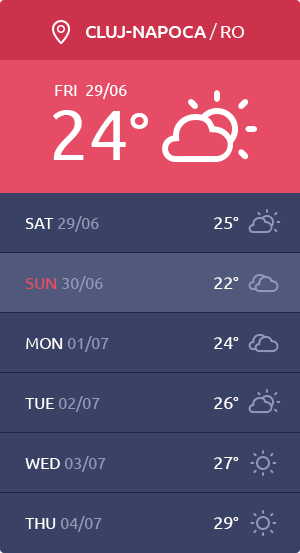
<style>
.page{position:relative;width:300px;height:553px;background:#394264}
.page>*{position:absolute;margin:0}
.t1{font:18px "Ubuntu-Medium";color:#ffffff;text-transform:uppercase}
.t2{font:18px "Ubuntu-Light";color:#ffffff;text-transform:uppercase}
.t3{font:18px "Ubuntu";color:#ffffff;text-transform:uppercase}
.t4{font:16px "Ubuntu";color:#ffffff}
.t5{font:70px "Ubuntu";color:#ffffff}
.t6{font:62.5px "Ubuntu";color:#ffffff}
.t7{font:16px/20px "Ubuntu";color:#9099b7}
.t8{font:16px/20px "Ubuntu";color:#ffffff}
.t9{font:16px/20px "Ubuntu";color:#e64c65}
.t10{font:18px/20px "Ubuntu";color:#ffffff}
.t11{font:16px "Ubuntu";color:#000000}
</style>
<div class="page">
<p class="t1" style="left:86px;top:23px;width:158px;height:17px">CLUJ-NAPOCA <span class="t2">/ </span><span class="t3">ro</span></p>
<p class="t4" style="left:55px;top:83px;width:72px;height:16px">FRI  29/06</p>
<p class="t5" style="left:53px;top:110px;width:95px;height:50px">24<span class="t6">°</span></p>
<p class="t7" style="left:25px;top:216px;width:84px;height:316px"><span class="t8">SAT </span>29/06<br><br><br><span class="t9">SUN </span>30/06<br><span class="t8"><br><br>MON </span>01/07<br><span class="t8"><br><br>TUE </span>02/07<br><span class="t8"><br><br>WED </span>03/07<br><span class="t8"><br><br>THU </span>04/07</p>
<p class="t10" style="left:214px;top:217px;width:25px;height:312px">25<span class="t11">°<br></span><br><br>22<span class="t11">°<br><br></span><br>24<span class="t11">°<br></span><br><br>26<span class="t11">°<br></span><br><br>27<span class="t11">°<br></span><br><br>29<span class="t11">°</span></p>
</div>
